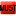
<style>
.page{position:relative;width:16px;height:16px}
.page>*{position:absolute;margin:0}
.t1{font:9.2px "ArialNarrow";color:#000000;scale:0.79 1}
</style>
<div class="page">
<p class="t1" style="left:0px;top:5px;width:17px;height:6px">MUST</p>
</div>
